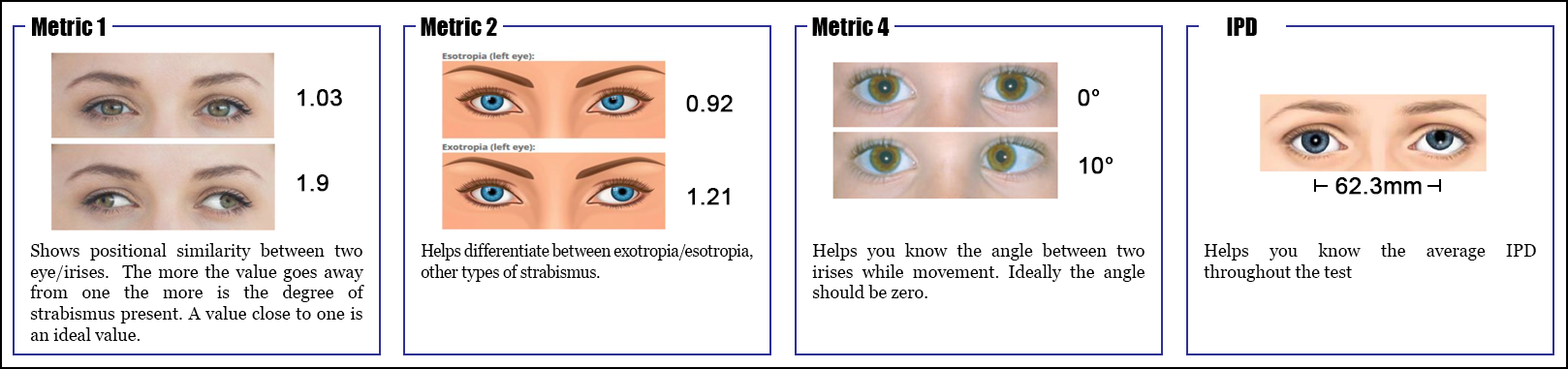
<style>
.page{position:relative;width:1568px;height:369px;background:#ffffff}
.page>*{position:absolute;margin:0}
.t1{font:23.3px "Impact";color:#000000}
.t2{font:23.3px "ArialMT";color:#000000;font-weight:bold}
.t3{font:17.4px "Georgia";color:#000000}
.t4{font:17.4px "Georgia";letter-spacing:-0.019em;color:#000000;scale:0.95 1}
</style>
<div class="page">
<p class="t1" style="left:32px;top:17px;width:74px;height:19px">Metric 1</p>
<p class="t1" style="left:421px;top:17px;width:76px;height:19px">Metric 2</p>
<p class="t1" style="left:812px;top:17px;width:78px;height:19px">Metric 4</p>
<p class="t1" style="left:1227px;top:17px;width:30px;height:19px">IPD</p>
<p class="t2" style="left:298px;top:89px;width:44px;height:18px">1.03</p>
<p class="t2" style="left:1078px;top:89px;width:22px;height:18px">0°</p>
<p class="t2" style="left:686px;top:95px;width:47px;height:17px">0.92</p>
<p class="t2" style="left:1080px;top:157px;width:33px;height:17px">10°</p>
<p class="t2" style="left:298px;top:174px;width:31px;height:18px">1.9</p>
<p class="t2" style="left:1335px;top:177px;width:87px;height:18px">62.3mm</p>
<p class="t2" style="left:688px;top:188px;width:42px;height:17px">1.21</p>
<p class="t3" style="left:30px;top:243px;width:334px;height:98px;text-align:justify">Shows positional similarity between two eye/irises.  The more the value goes away from one the more is the degree of strabismus present. A value close to one is an ideal value.</p>
<p class="t4" style="left:421px;top:243px;width:332px;height:39px;text-align:justify">Helps differentiate between exotropia/esotropia, other types of strabismus.</p>
<p class="t3" style="left:812px;top:243px;width:333px;height:55px;text-align:justify">Helps you know the angle between two irises while movement. Ideally the angle should be zero.</p>
<p class="t3" style="left:1204px;top:243px;width:332px;height:39px;text-align:justify">Helps you know the average IPD throughout the test</p>
</div>
